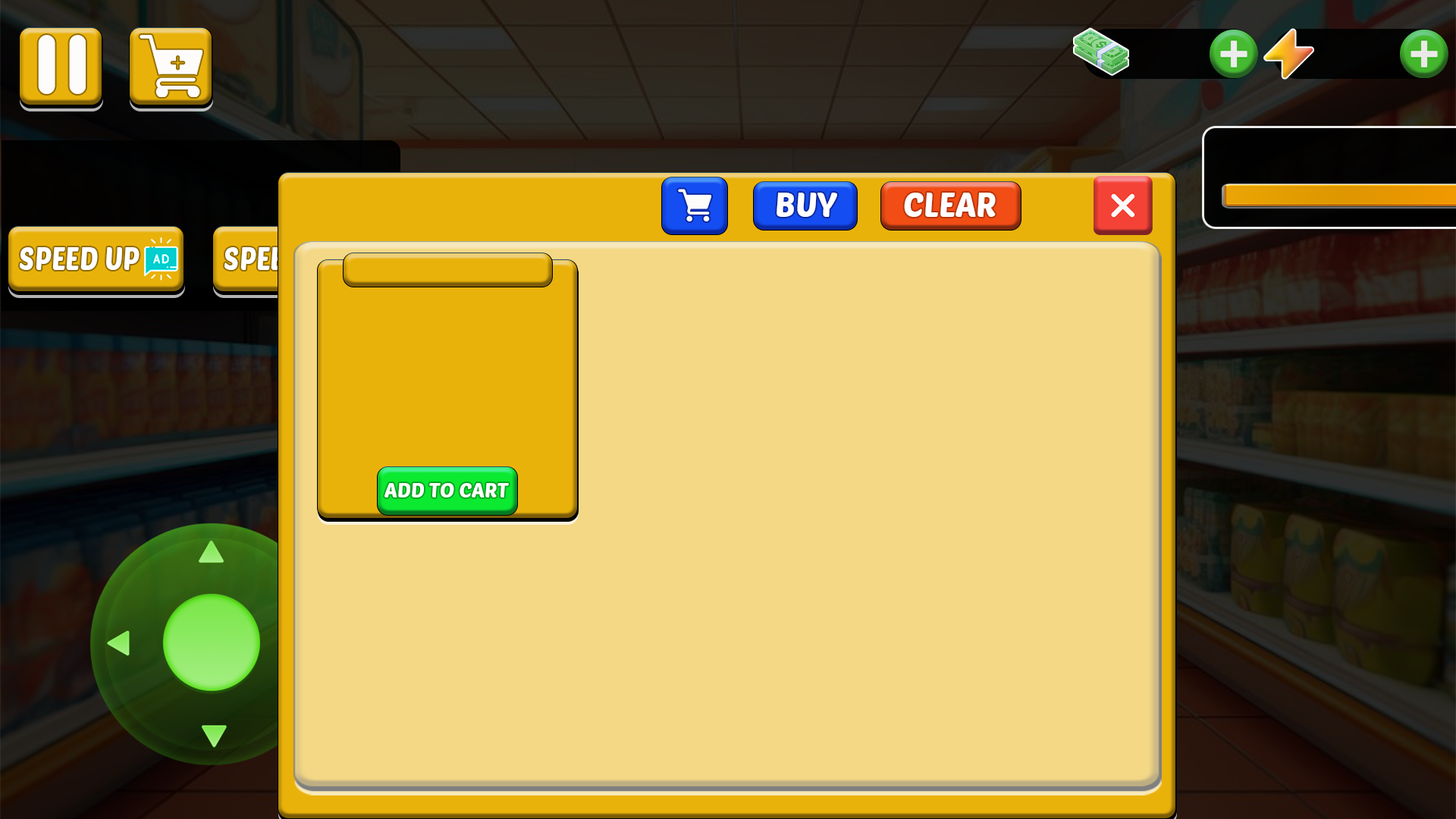
<style>
.page{position:relative;width:1456px;height:819px;background:#f4d885}
.page>*{position:absolute;margin:0}
.t1{font:33px "PoetsenOne-Regular";color:#ffffff}
.t2{font:20.8px "PoetsenOne-Regular";color:#ffffff}
</style>
<div class="page">
<p class="t1" style="left:777px;top:193px;width:60px;height:24px">BUY</p>
<p class="t1" style="left:904px;top:193px;width:92px;height:24px">CLEAR</p>
<p class="t2" style="left:384px;top:483px;width:125px;height:14px">ADD TO CART</p>
</div>
